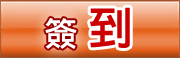
<style>
.page{position:relative;width:180px;height:58px}
.page>*{position:absolute;margin:0}
.t1{font:33px "NewGothic-Extra";letter-spacing:0.35em;color:#ffffff}
.t2{font:45px "NewGothic-Extra";letter-spacing:0.35em;color:#cc0000}
</style>
<div class="page">
<p class="t1" style="left:45px;top:17px;width:32px;height:32px">簽</p>
<p class="t2" style="left:90px;top:7px;width:40px;height:41px">到</p>
</div>
